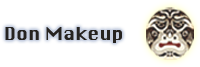
<style>
.page{position:relative;width:200px;height:67px;background:#ffffff}
.page>*{position:absolute;margin:0}
.t1{font:17.4px "Krungthep";letter-spacing:0.01em;color:#262320;scale:1.03 1}
</style>
<div class="page">
<p class="t1" style="left:5px;top:27px;width:117px;height:16px">Don Makeup</p>
</div>
